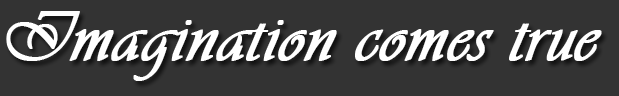
<style>
.page{position:relative;width:619px;height:96px;background:#333333}
.page>*{position:absolute;margin:0}
.t1{font:73.3px "Vivaldii";color:#ffffff;font-weight:bold}
</style>
<div class="page">
<p class="t1" style="left:6px;top:11px;width:596px;height:70px">Imagination comes true</p>
</div>
